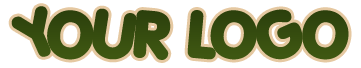
<style>
.page{position:relative;width:361px;height:68px;background:#ffffff}
.page>*{position:absolute;margin:0}
.t1{font:62.3px "Porkys";color:#354c0f;text-transform:uppercase}
</style>
<div class="page">
<p class="t1" style="left:11px;top:6px;width:338px;height:54px">Your Logo</p>
</div>
